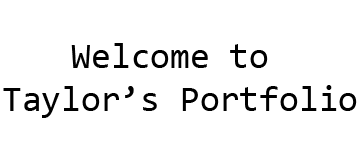
<style>
.page{position:relative;width:360px;height:144px;background:#ffffff}
.page>*{position:absolute;margin:0}
.t1{font:36px "Consolas";color:#000000}
</style>
<div class="page">
<p class="t1" style="left:3px;top:43px;width:354px;height:75px;text-align:center">Welcome to <br>Taylor’s Portfolio</p>
</div>
